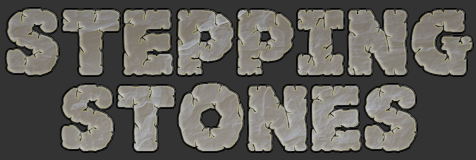
<style>
.page{position:relative;width:476px;height:160px;background:#333333}
.page>*{position:absolute;margin:0}
.t1{font:80px "JFRockSolid";color:#8a857e}
.t2{font:80px "JFRockSolid";color:#97948c}
</style>
<div class="page">
<p class="t1" style="left:6px;top:9px;width:466px;height:66px">STEPPING</p>
<p class="t2" style="left:61px;top:83px;width:355px;height:68px">StoneS</p>
</div>
